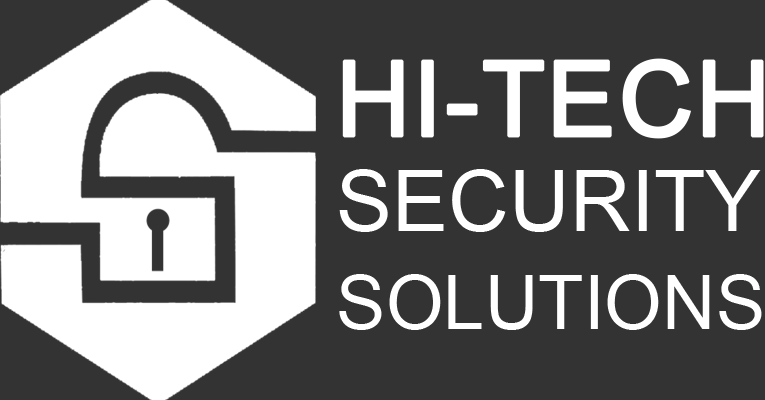
<style>
.page{position:relative;width:765px;height:400px;background:#333333}
.page>*{position:absolute;margin:0}
.t1{font:104px "ArialMT";color:#ffffff;font-weight:bold}
.t2{font:85px "ArialMT";color:#ffffff}
.t3{font:75px "ArialMT";color:#fefefe}
</style>
<div class="page">
<p class="t1" style="left:342px;top:58px;width:422px;height:81px">HI-TECH</p>
<p class="t2" style="left:339px;top:169px;width:422px;height:63px">SECURITY</p>
<p class="t3" style="left:339px;top:274px;width:423px;height:56px">SOLUTIONS</p>
</div>
